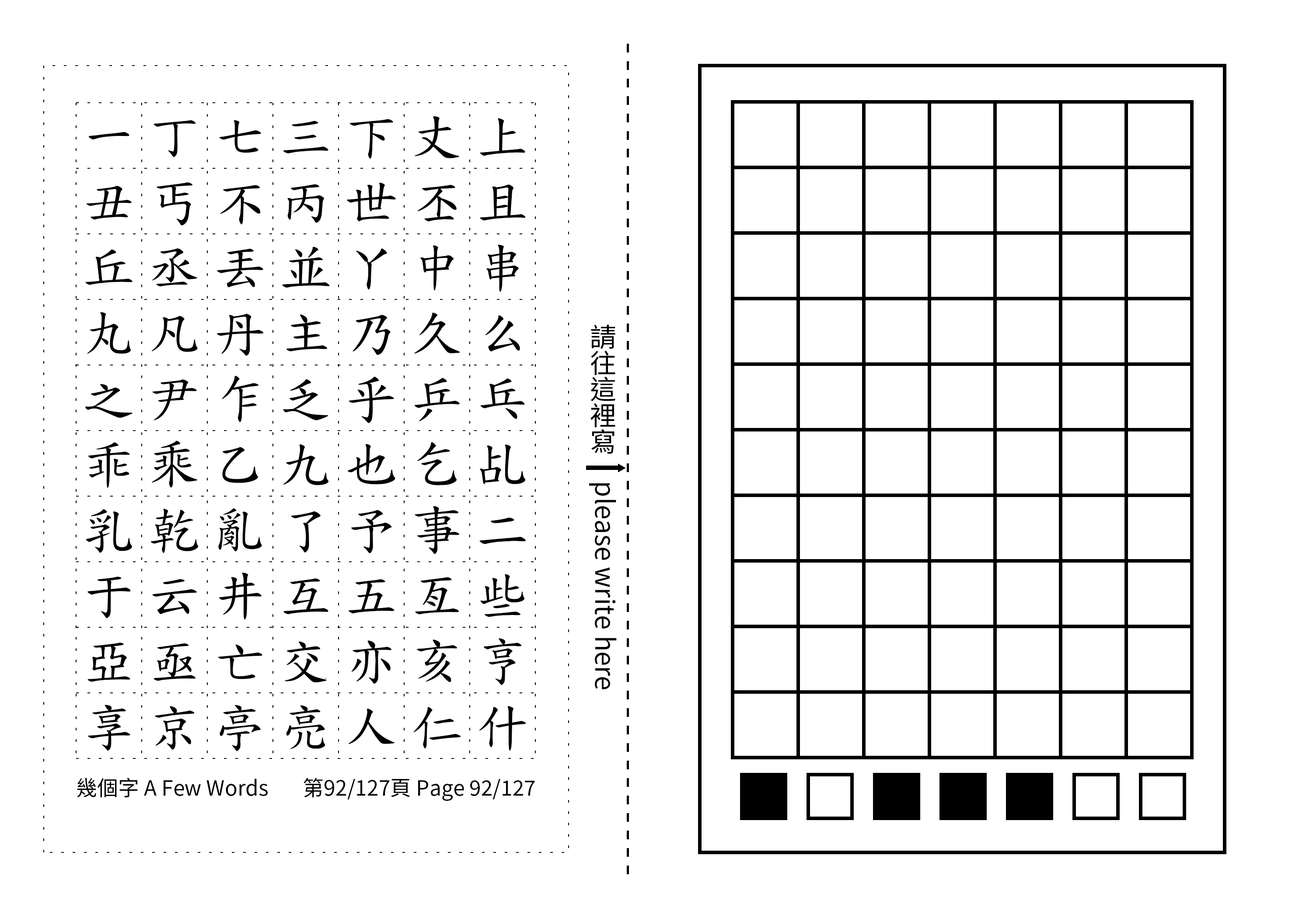
<style>
.page{position:relative;width:1299px;height:918px;background:#ffffff}
.page>*{position:absolute;margin:0}
.t1{font:52.5px/65.6px "TW-Kai-98_1";letter-spacing:0.25em;color:#000000}
.t2{font:26.2px "SourceHanSansTC-Regular";color:#000000}
.t3{font:21px "SourceHanSansTC-Regular";color:#000000}
</style>
<div class="page">
<p class="t1" style="left:85px;top:116px;width:441px;height:636px;text-align:center">一丁七三下丈上丑丐不丙世丕且丘丞丟並丫中串丸凡丹主乃久么之尹乍乏乎乒乓乖乘乙九也乞乩乳乾亂了予事二于云井互五亙些亞亟亡交亦亥亨享京亭亮人仁什</p>
<p class="t2" style="left:589px;top:324px;width:28px;height:366px;text-align:center">請往這裡寫　please write here</p>
<p class="t3" style="left:77px;top:778px;width:191px;height:20px">幾個字 A Few Words</p>
<p class="t3" style="left:303px;top:778px;width:232px;height:23px">第92/127頁 Page 92/127</p>
</div>
